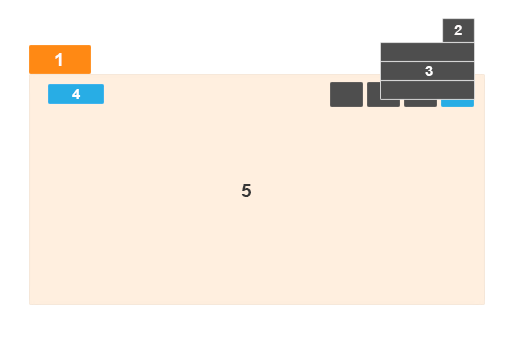
<style>
.page{position:relative;width:511px;height:338px;background:#ffefdf}
.page>*{position:absolute;margin:0}
.t1{font:14px "Arial-BoldMT";letter-spacing:-0.025em;color:#fdfafa;scale:1.06 1}
.t2{font:18px "Arial-BoldMT";letter-spacing:-0.025em;color:#fdfdfc;scale:1.06 1}
.t3{font:14px "Arial-BoldMT";letter-spacing:-0.025em;color:#ffffff;scale:1.06 1}
.t4{font:17.8px "Arial-BoldMT";letter-spacing:-0.025em;color:#373737;scale:1.06 1}
</style>
<div class="page">
<p class="t1" style="left:454px;top:25px;width:8px;height:10px">2</p>
<p class="t2" style="left:55px;top:53px;width:7px;height:13px">1</p>
<p class="t3" style="left:425px;top:66px;width:8px;height:10px">3</p>
<p class="t3" style="left:72px;top:89px;width:9px;height:10px">4</p>
<p class="t4" style="left:241px;top:184px;width:10px;height:13px">5</p>
</div>
